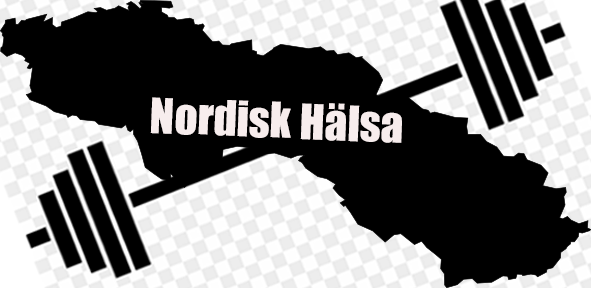
<style>
.page{position:relative;width:591px;height:288px;background:#000000}
.page>*{position:absolute;margin:0}
.t1{font:45px "Impact";color:#f7eded}
</style>
<div class="page">
<p class="t1" style="left:150px;top:97px;width:252px;height:46px;rotate:2deg">Nordisk Hälsa</p>
</div>
